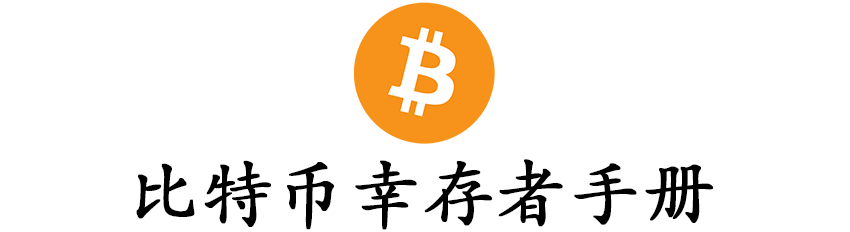
<style>
.page{position:relative;width:850px;height:232px;background:#ffffff}
.page>*{position:absolute;margin:0}
.t1{font:72px "AdobeKaitiStd-Regular";color:#000000;font-weight:bold}
</style>
<div class="page">
<p class="t1" style="left:136px;top:159px;width:577px;height:71px">比特币幸存者手册</p>
</div>
